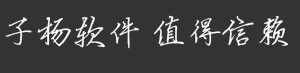
<style>
.page{position:relative;width:300px;height:73px;background:#333333}
.page>*{position:absolute;margin:0}
.t1{font:35px "Jyinbixinsu";color:#fbfcfc}
</style>
<div class="page">
<p class="t1" style="left:5px;top:15px;width:283px;height:34px">子杨软件 值得信赖</p>
</div>
